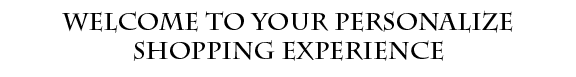
<style>
.page{position:relative;width:576px;height:77px;background:#ffffff}
.page>*{position:absolute;margin:0}
.t1{font:24px "CharlemagneStd-Bold";color:#000000}
</style>
<div class="page">
<p class="t1" style="left:62px;top:10px;width:451px;height:51px;text-align:center">Welcome to your personalize<br>Shopping Experience</p>
</div>
